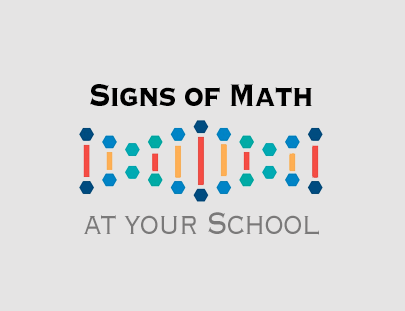
<style>
.page{position:relative;width:405px;height:311px;background:#e5e4e4}
.page>*{position:absolute;margin:0}
.t1{font:41px "Copperplate-Bold";letter-spacing:-0.04em;color:#000000;scale:0.8 1}
.t2{font:41px "Copperplate-Light";letter-spacing:-0.04em;color:#7a7979;scale:0.8 1}
</style>
<div class="page">
<p class="t1" style="left:90px;top:84px;width:222px;height:22px">Signs of Math</p>
<p class="t2" style="left:84px;top:212px;width:235px;height:23px">at your School</p>
</div>
